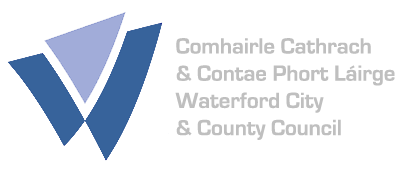
<style>
.page{position:relative;width:396px;height:173px;background:#ffffff}
.page>*{position:absolute;margin:0}
.t1{font:22.7px "EurostileBold";color:#c0c0c0}
</style>
<div class="page">
<p class="t1" style="left:175px;top:38px;width:220px;height:102px">Comhairle Cathrach<br>&amp; Contae Phort Láirge<br>Waterford City<br>&amp; County Council</p>
</div>
